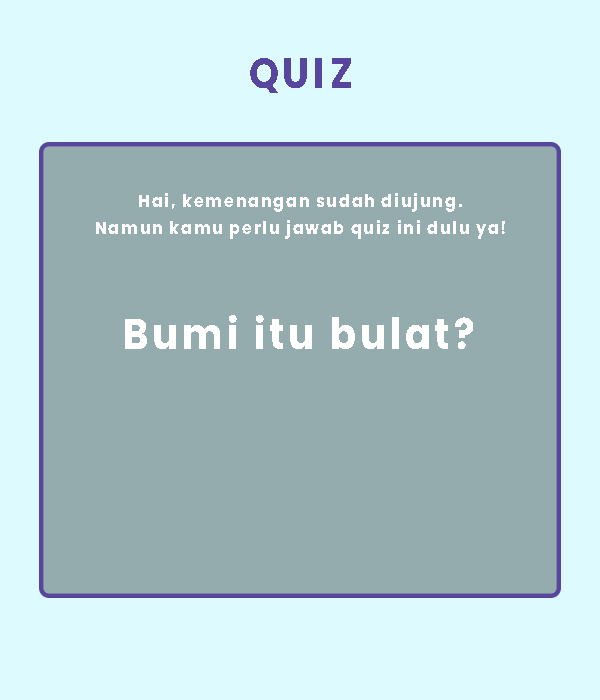
<style>
.page{position:relative;width:600px;height:700px;background:#95acaf}
.page>*{position:absolute;margin:0}
.t1{font:42.3px "Poppins-Bold";letter-spacing:0.1em;color:#58459e;scale:0.9 1}
.t2{font:17.7px/26.7px "Poppins-Bold";letter-spacing:0.1em;color:#ffffff;scale:0.9 1}
.t3{font:42.6px "Poppins-Bold";letter-spacing:0.1em;color:#ffffff;scale:0.9 1}
</style>
<div class="page">
<p class="t1" style="left:250px;top:58px;width:101px;height:35px">QUIZ</p>
<p class="t2" style="left:96px;top:193px;width:409px;height:46px;text-align:center">Hai, kemenangan sudah diujung.<br>Namun kamu perlu jawab quiz ini dulu ya!</p>
<p class="t3" style="left:125px;top:315px;width:348px;height:34px">Bumi itu bulat?</p>
</div>
